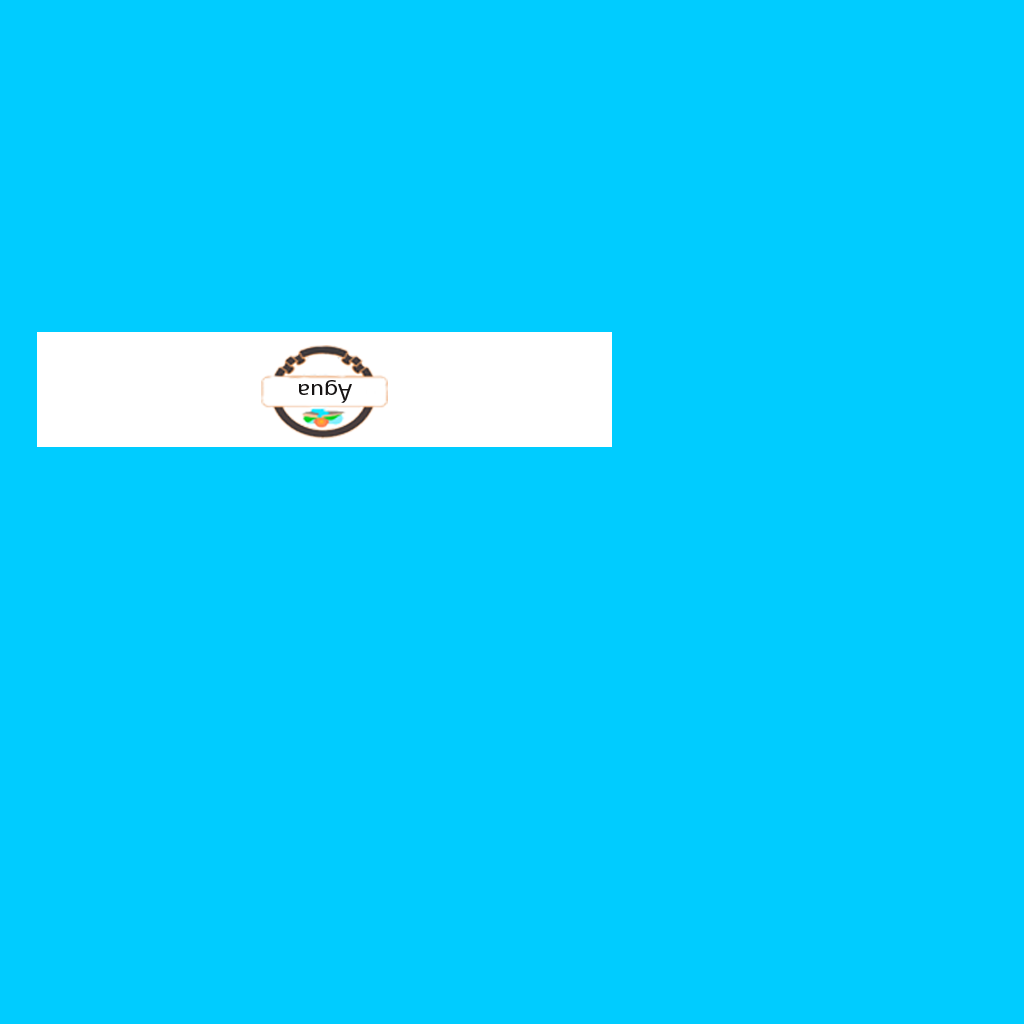
<style>
.page{position:relative;width:1024px;height:1024px;background:#00ccff}
.page>*{position:absolute;margin:0}
.t1{font:22.5px "MyriadPro-Regular";color:#161313;scale:1.11 1}
</style>
<div class="page">
<p class="t1" style="left:298px;top:380px;width:54px;height:23px;rotate:-180deg">Água</p>
</div>
